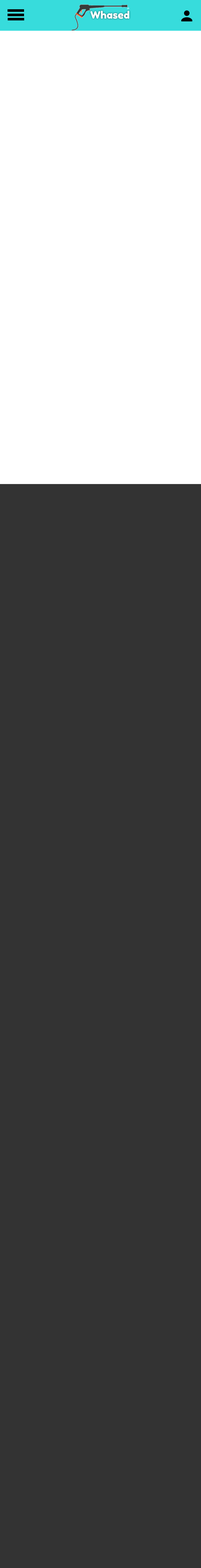
<style>
.page{position:relative;width:201px;height:1568px;background:#333333}
.page>*{position:absolute;margin:0}
.t1{font:10.2px "FredokaOne-Regular";color:#ffffff}
</style>
<div class="page">
<p class="t1" style="left:90px;top:11px;width:39px;height:8px">Whased</p>
</div>
